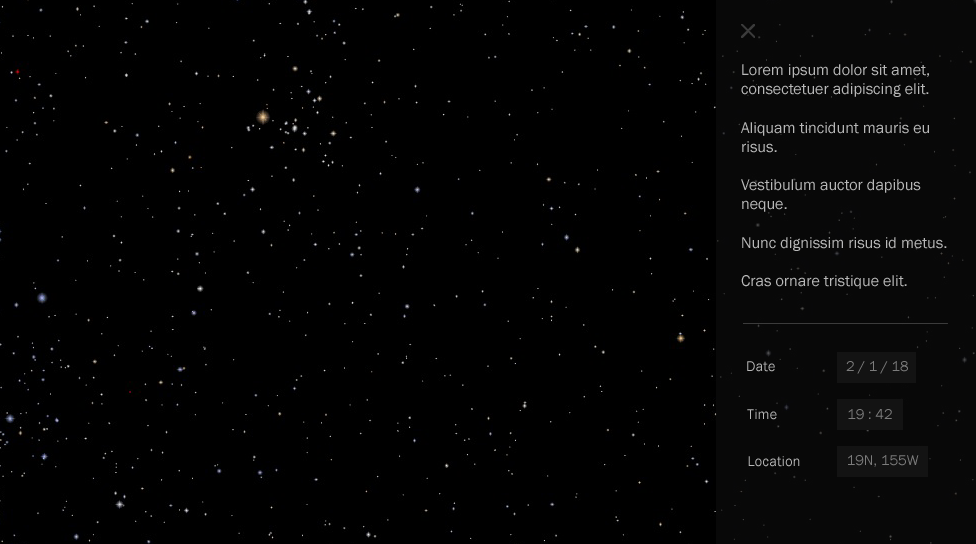
<style>
.page{position:relative;width:976px;height:544px;background:#000000}
.page>*{position:absolute;margin:0}
.t1{font:16px "FranklinGothic-Book";color:#b8b8b8}
.t2{font:14.8px "FranklinGothic-Book";color:#b8b8b8}
.t3{font:14.8px "FranklinGothic-Book";color:#7c7c7c}
</style>
<div class="page">
<p class="t1" style="left:741px;top:64px;width:206px;height:225px">Lorem ipsum dolor sit amet, <br>consectetuer adipiscing elit.<br><br>Aliquam tincidunt mauris eu <br>risus.<br><br>Vestibulum auctor dapibus <br>neque.<br><br>Nunc dignissim risus id metus.<br><br>Cras ornare tristique elit.</p>
<p class="t2" style="left:747px;top:361px;width:28px;height:11px">Date</p>
<p class="t3" style="left:846px;top:361px;width:62px;height:13px">2 / 1 / 18</p>
<p class="t2" style="left:747px;top:409px;width:30px;height:11px">Time</p>
<p class="t3" style="left:848px;top:409px;width:44px;height:11px">19 : 42</p>
<p class="t2" style="left:748px;top:456px;width:52px;height:11px">Location</p>
<p class="t3" style="left:848px;top:455px;width:71px;height:12px">19N, 155W</p>
</div>
